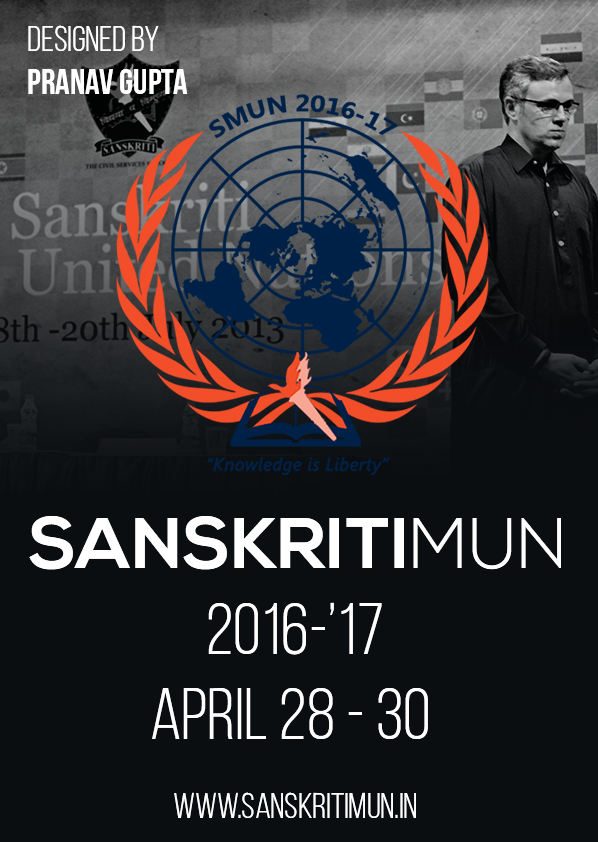
<style>
.page{position:relative;width:598px;height:842px;background:#0b0e11}
.page>*{position:absolute;margin:0}
.t1{font:36px "BebasNeueBold";color:#ffffff}
.t2{font:36px "BebasNeueBook";color:#ffffff}
.t3{font:72px "NexaBold";color:#ffffff}
.t4{font:72px "NexaLight";color:#ffffff}
.t5{font:72px "BebasNeueBook";color:#ffffff}
</style>
<div class="page">
<p class="t1" style="left:28px;top:25px;width:160px;height:69px"><span class="t2">Designed BY <br></span>Pranav Gupta</p>
<p class="t3" style="left:29px;top:516px;width:532px;height:54px">SANSKRITI<span class="t4">MUN</span></p>
<p class="t5" style="left:208px;top:602px;width:174px;height:53px">2016-’17</p>
<p class="t5" style="left:152px;top:688px;width:276px;height:51px">April 28 - 30</p>
<p class="t2" style="left:174px;top:792px;width:242px;height:26px">www.sanskritimun.in</p>
</div>
